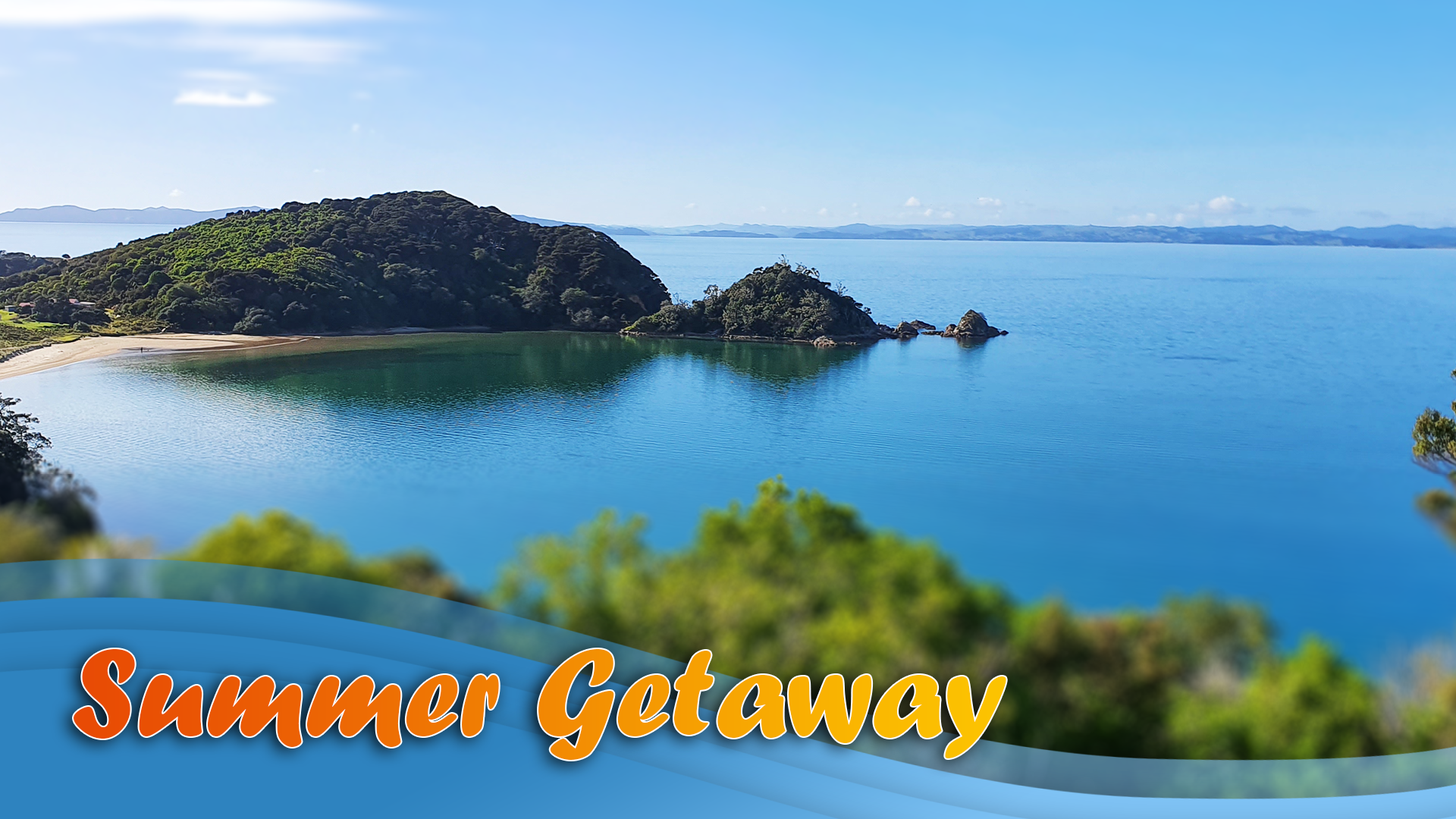
<style>
.page{position:relative;width:1456px;height:819px}
.page>*{position:absolute;margin:0}
.t1{font:129px "ForteMT"}
</style>
<div class="page">
<p class="t1" style="left:74px;top:649px;width:932px;height:111px">Summer Getaway</p>
</div>
